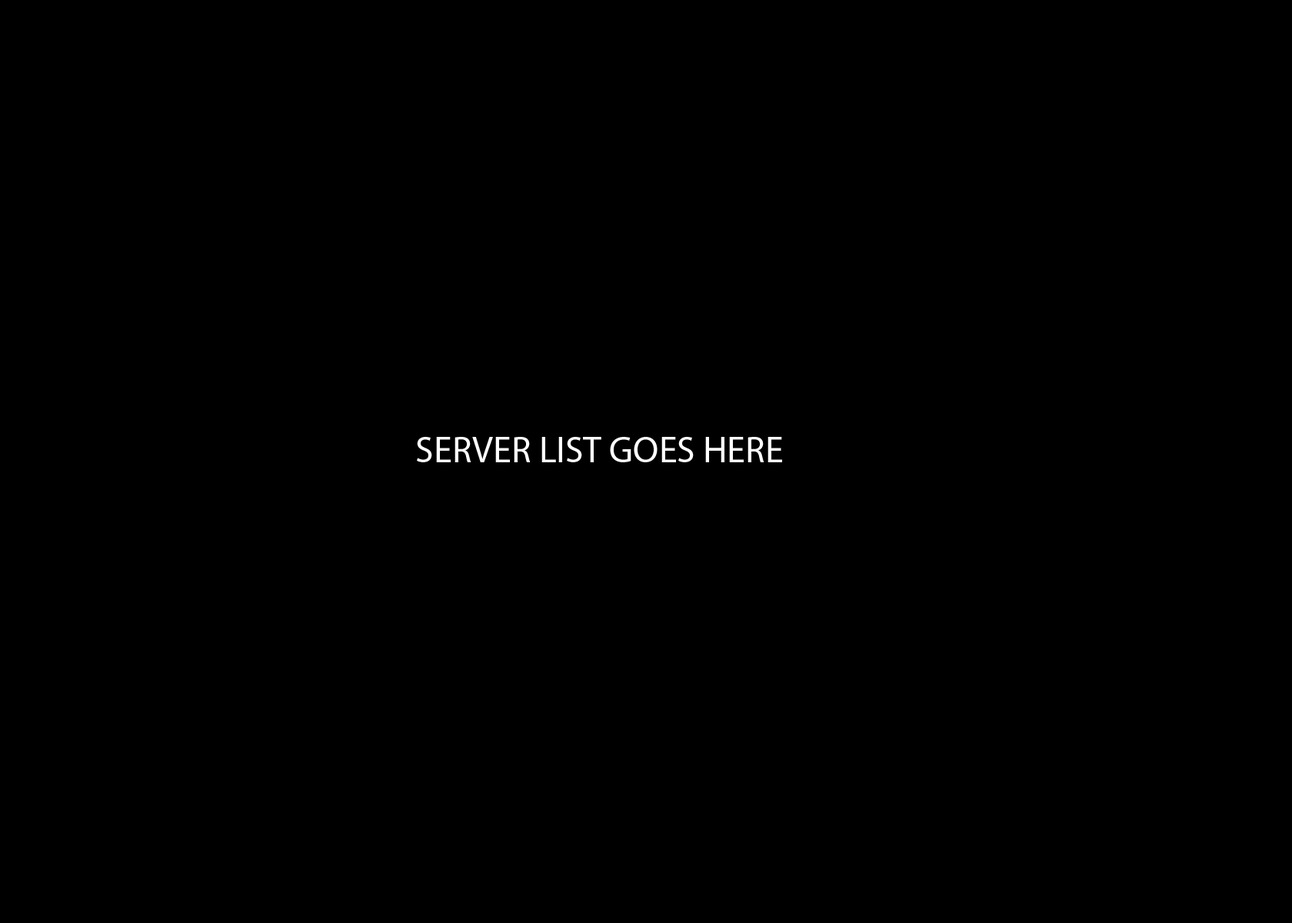
<style>
.page{position:relative;width:1292px;height:923px;background:#000000}
.page>*{position:absolute;margin:0}
.t1{font:36.9px "MyriadPro-Regular";color:#ffffff}
</style>
<div class="page">
<p class="t1" style="left:417px;top:437px;width:365px;height:25px">SERVER LIST GOES HERE</p>
</div>
